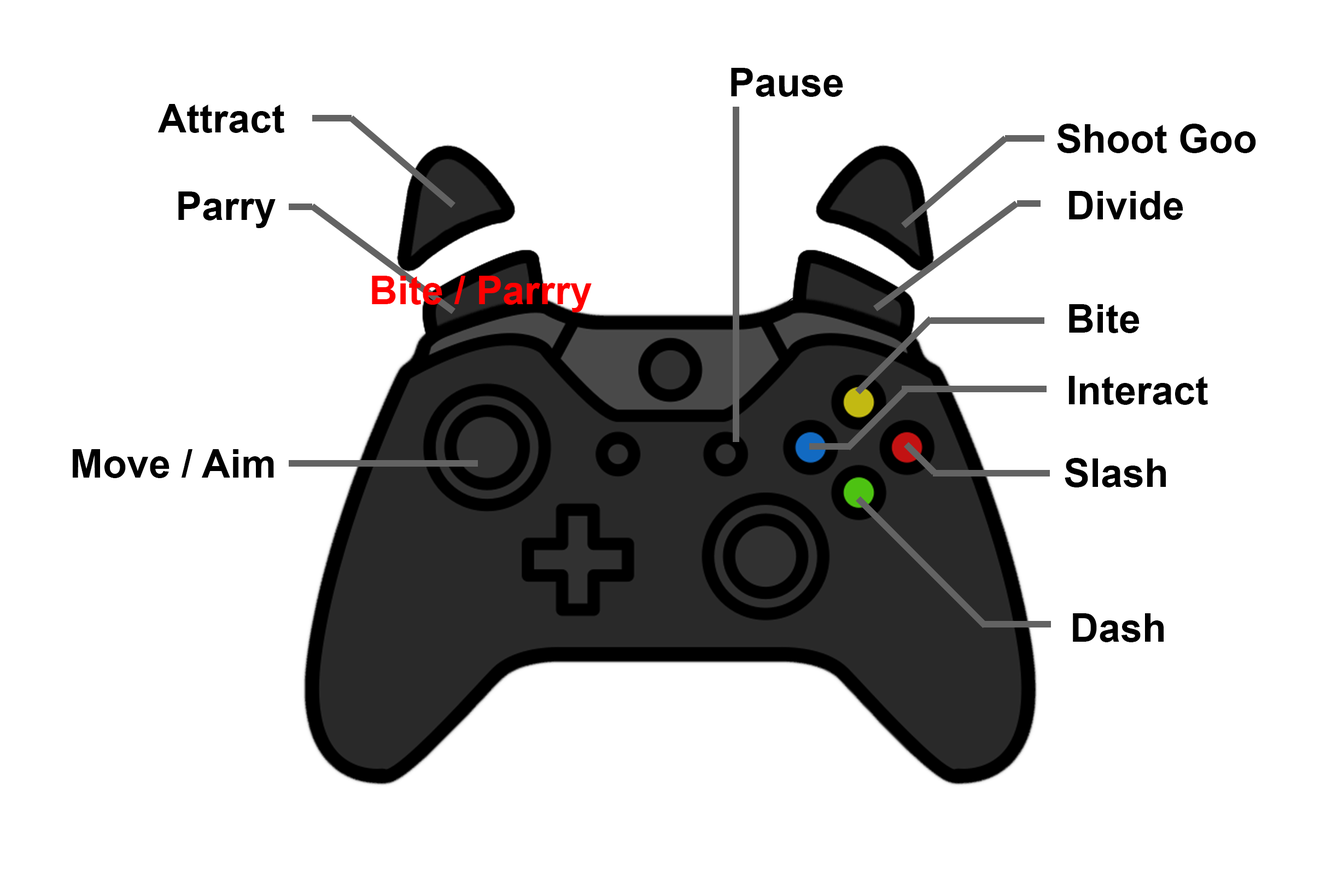
<style>
.page{position:relative;width:1332px;height:895px;background:#ffffff}
.page>*{position:absolute;margin:0}
.t1{font:39.4px "Arial-BoldMT";color:#000000}
.t2{font:39.4px "Arial-BoldMT";color:#ff0000}
</style>
<div class="page">
<p class="t1" style="left:731px;top:68px;width:112px;height:29px">Pause</p>
<p class="t1" style="left:158px;top:104px;width:126px;height:29px">Attract Pieces</p>
<p class="t1" style="left:1057px;top:124px;width:199px;height:29px">Shoot Goo</p>
<p class="t1" style="left:178px;top:191px;width:98px;height:37px">Parry</p>
<p class="t1" style="left:1069px;top:191px;width:115px;height:29px">Divide</p>
<p class="t2" style="left:372px;top:276px;width:220px;height:36px">Bite / Parrry</p>
<p class="t1" style="left:1069px;top:304px;width:71px;height:29px">Bite</p>
<p class="t1" style="left:1069px;top:376px;width:139px;height:29px">Interact</p>
<p class="t1" style="left:73px;top:449px;width:201px;height:29px">Move / Aim</p>
<p class="t1" style="left:1065px;top:458px;width:102px;height:29px">Slash</p>
<p class="t1" style="left:1073px;top:613px;width:92px;height:29px">Dash</p>
</div>
